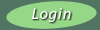
<style>
.page{position:relative;width:100px;height:30px;background:#95d687}
.page>*{position:absolute;margin:0}
.t1{font:16px "Myriad-Italic";letter-spacing:0.05em;color:#ffffff}
</style>
<div class="page">
<p class="t1" style="left:32px;top:6px;width:40px;height:17px">Login</p>
</div>
